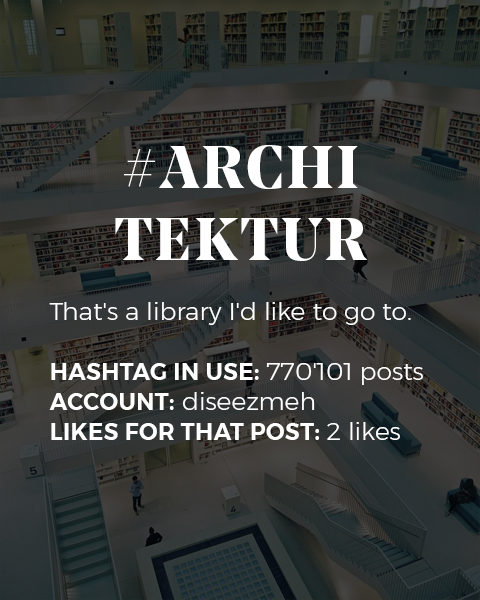
<style>
.page{position:relative;width:480px;height:600px}
.page>*{position:absolute;margin:0}
.t1{font:25px "Montserrat-Light";color:#ffffff}
.t2{font:60px "NoeDisplay-Bold";letter-spacing:0.05em;color:#ffffff;text-transform:uppercase}
.t3{font:23px "Montserrat-SemiBold";letter-spacing:0.02em;color:#ffffff;text-transform:uppercase}
</style>
<div class="page">
<p class="t1" style="left:49px;top:145px;width:374px;height:295px;text-align:center"><span class="t2">#archi tektur<br><br></span>That's a library I'd like to go to. <br><br><span class="t3">Hashtag in use: </span>770'101 posts<br><span class="t3">Account:</span> diseezmeh<br><span class="t3">Likes for that post: </span>2 likes</p>
</div>
